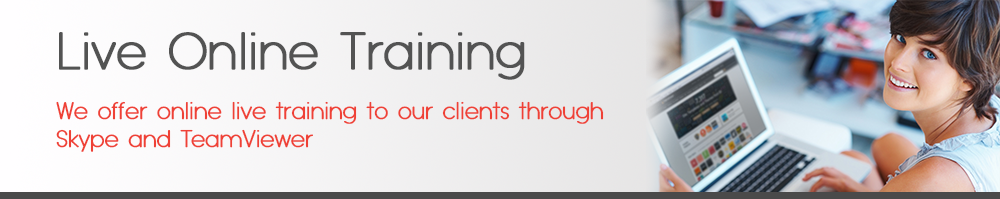
<style>
.page{position:relative;width:1000px;height:199px}
.page>*{position:absolute;margin:0}
.t1{font:50.1px "TypoGroteskRounded-Light";color:#535353;font-weight:bold}
.t2{font:22.9px "TypoGroteskRounded-Light";color:#ef4136;font-weight:bold}
</style>
<div class="page">
<p class="t1" style="left:59px;top:32px;width:466px;height:48px">Live Online Training</p>
<p class="t2" style="left:56px;top:101px;width:548px;height:51px">We offer online live training to our clients through <br>Skype and TeamViewer</p>
</div>
